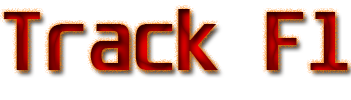
<style>
.page{position:relative;width:351px;height:100px;background:#ffffff}
.page>*{position:absolute;margin:0}
.t1{font:72px "Unispace-Bold"}
</style>
<div class="page">
<p class="t1" style="left:4px;top:9px;width:344px;height:61px">Track F1</p>
</div>
